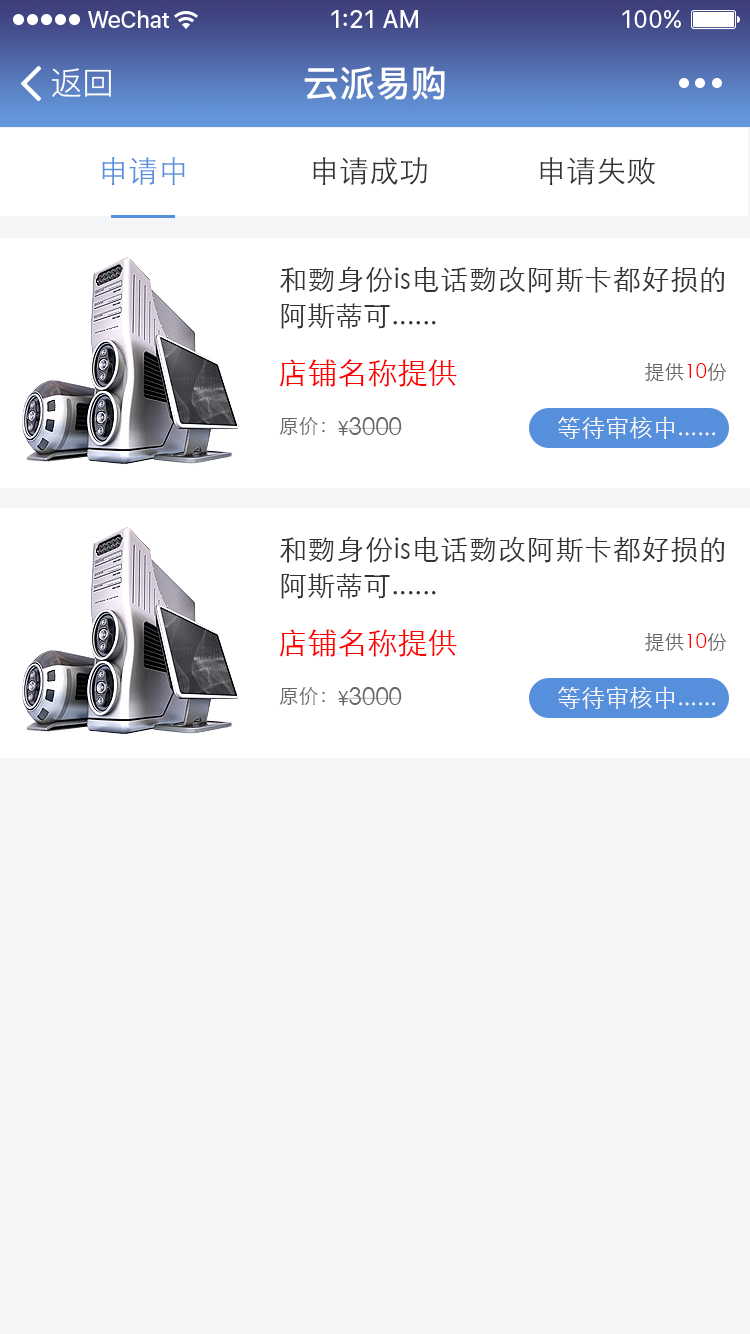
<style>
.page{position:relative;width:750px;height:1334px;background:#f4f5f6}
.page>*{position:absolute;margin:0}
.t1{font:32px "PingFang-SC-Regular";color:#ffffff}
.t2{font:36px "PingFang-SC-Bold";color:#ffffff}
.t3{font:30px "STXihei";color:#568fdc}
.t4{font:30px "STXihei";color:#333333}
.t5{font:28px/36px "STXihei";color:#333333}
.t6{font:30px "STXihei";color:#ff0000}
.t7{font:20px "STXihei";color:#666666}
.t8{font:20px "STXihei";color:#ff0000}
.t9{font:24px "STXihei";color:#666666}
.t10{font:24px "STXihei";color:#f7f7f7}
</style>
<div class="page">
<p class="t1" style="left:52px;top:68px;width:59px;height:29px">返回</p>
<p class="t2" style="left:304px;top:66px;width:141px;height:34px">云派易购</p>
<p class="t3" style="left:102px;top:157px;width:83px;height:28px">申请中</p>
<p class="t4" style="left:313px;top:157px;width:114px;height:28px">申请成功</p>
<p class="t4" style="left:540px;top:157px;width:116px;height:28px">申请失败</p>
<p class="t5" style="left:280px;top:266px;width:445px;height:63px;text-align:justify">和覅身份is电话覅改阿斯卡都好损的阿斯蒂可......</p>
<p class="t6" style="left:279px;top:359px;width:178px;height:28px">店铺名称提供</p>
<p class="t7" style="left:645px;top:363px;width:82px;height:19px">提供<span class="t8">10</span>份</p>
<p class="t7" style="left:279px;top:417px;width:46px;height:19px">原价：</p>
<p class="t9" style="left:337px;top:417px;width:65px;height:19px"><span class="t7">¥</span>3000</p>
<p class="t10" style="left:558px;top:416px;width:157px;height:23px">等待审核中......</p>
<p class="t5" style="left:280px;top:536px;width:445px;height:63px;text-align:justify">和覅身份is电话覅改阿斯卡都好损的阿斯蒂可......</p>
<p class="t6" style="left:279px;top:629px;width:178px;height:28px">店铺名称提供</p>
<p class="t7" style="left:645px;top:633px;width:82px;height:19px">提供<span class="t8">10</span>份</p>
<p class="t7" style="left:279px;top:687px;width:46px;height:19px">原价：</p>
<p class="t9" style="left:337px;top:687px;width:65px;height:19px"><span class="t7">¥</span>3000</p>
<p class="t10" style="left:558px;top:686px;width:157px;height:23px">等待审核中......</p>
</div>
